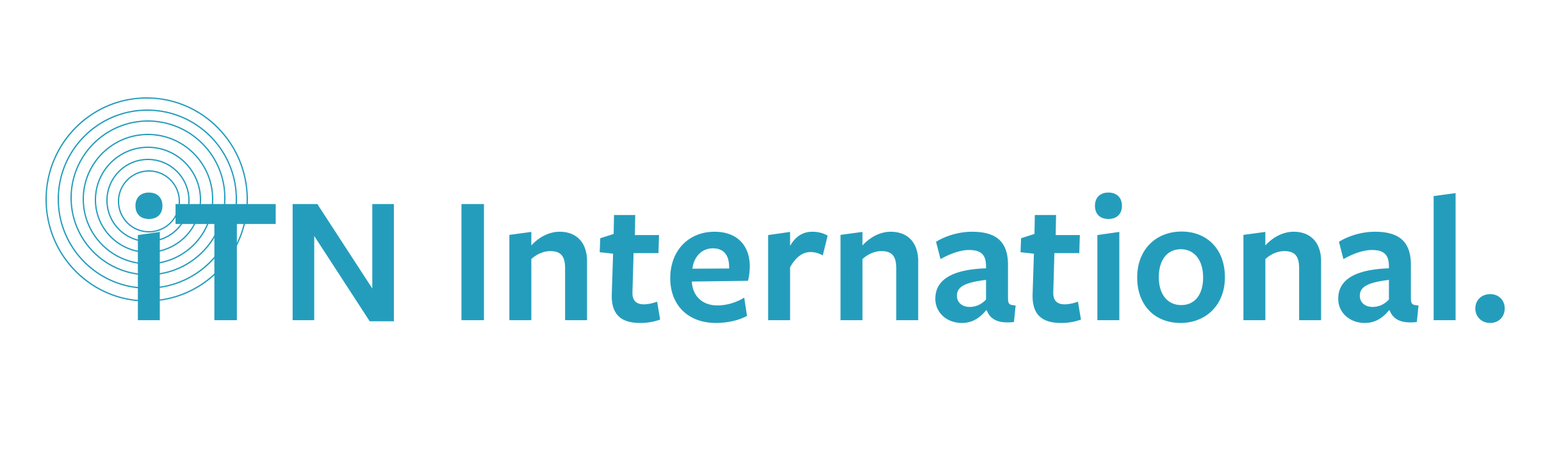
<style>
.page{position:relative;width:1568px;height:461px;background:#ffffff}
.page>*{position:absolute;margin:0}
.t1{font:185.8px "FreightSansProSemibold-Regular";color:#249cbb}
</style>
<div class="page">
<p class="t1" style="left:135px;top:192px;width:1370px;height:131px">iTN International.</p>
</div>
